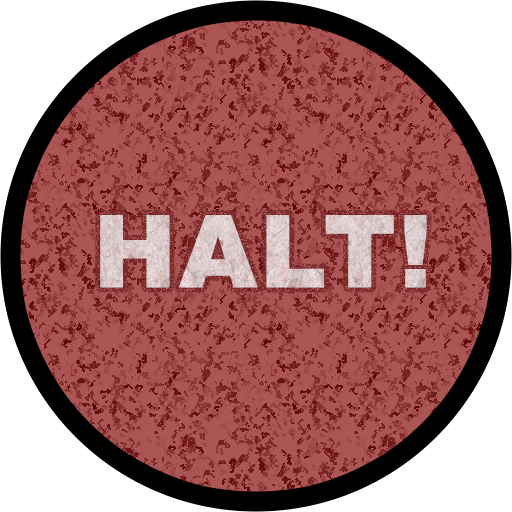
<style>
.page{position:relative;width:512px;height:512px;background:#ac5555}
.page>*{position:absolute;margin:0}
.t1{font:100px "Arial-Black";color:#dbcaca;font-weight:bold}
</style>
<div class="page">
<p class="t1" style="left:100px;top:215px;width:327px;height:73px">HALT!</p>
</div>
